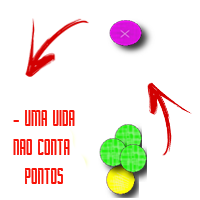
<style>
.page{position:relative;width:200px;height:200px;background:#ffffff}
.page>*{position:absolute;margin:0}
.t1{font:24px "Borg";color:#f71207}
</style>
<div class="page">
<p class="t1" style="left:13px;top:110px;width:62px;height:74px;text-align:center">- UMA VIDA<br>NAO CONTA <br>PONTOS</p>
</div>
